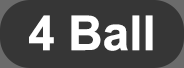
<style>
.page{position:relative;width:184px;height:68px;background:#363636}
.page>*{position:absolute;margin:0}
.t1{font:48px "Arial-BoldMT";color:#ffffff}
</style>
<div class="page">
<p class="t1" style="left:29px;top:15px;width:124px;height:36px">4 Ball</p>
</div>
